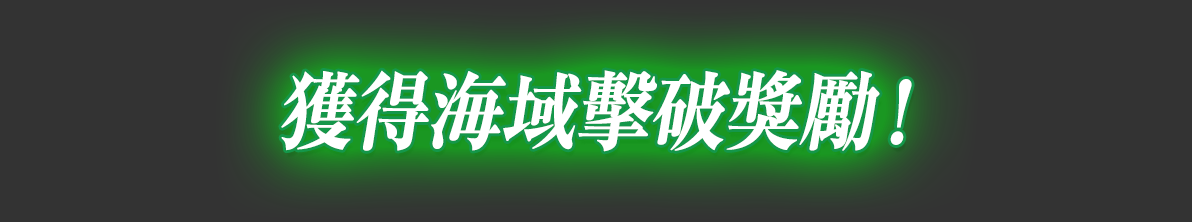
<style>
.page{position:relative;width:1192px;height:222px;background:#333333}
.page>*{position:absolute;margin:0}
.t1{font:80.1px "RyuminPr6N-ExBold";color:#ffffff;font-weight:bold;font-style:italic;scale:0.96 1}
.t2{font:85px "RyuminPr6N-ExBold";color:#ffffff;font-weight:bold;font-style:italic;scale:0.9 1}
</style>
<div class="page">
<p class="t1" style="left:281px;top:78px;width:631px;height:77px">獲得海域擊破獎勵！</p>
<p class="t2" style="left:281px;top:70px;width:631px;height:82px">獲得海域擊破獎勵！</p>
</div>
